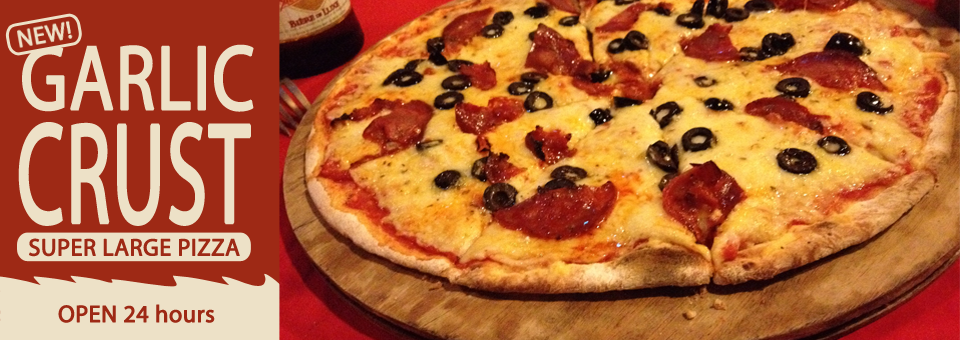
<style>
.page{position:relative;width:960px;height:340px}
.page>*{position:absolute;margin:0}
.t1{font:92.3px "MyriadPro-Regular";color:#ede1c7;font-weight:bold;scale:0.79 1}
.t2{font:143.4px "MyriadPro-Regular";color:#ede1c7;font-weight:bold;scale:0.57 1}
.t3{font:24px "MyriadPro-Regular";color:#9e2915;font-weight:bold}
</style>
<div class="page">
<p class="t1" style="left:22px;top:44px;width:232px;height:68px">GARLIC</p>
<p class="t2" style="left:18px;top:122px;width:233px;height:104px">CRUST</p>
<p class="t3" style="left:29px;top:238px;width:211px;height:19px">SUPER LARGE PIZZA</p>
<p class="t3" style="left:58px;top:304px;width:157px;height:19px">OPEN 24 hours</p>
</div>
